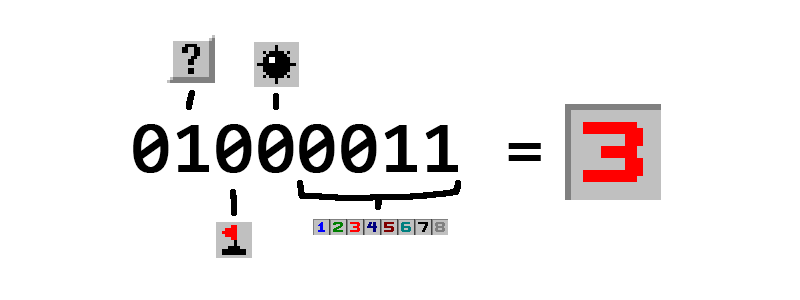
<style>
.page{position:relative;width:800px;height:300px;background:#ffffff}
.page>*{position:absolute;margin:0}
.t1{font:72px "Consolas";color:#000000;font-weight:bold}
</style>
<div class="page">
<p class="t1" style="left:133px;top:124px;width:408px;height:49px">01000011 =</p>
</div>
